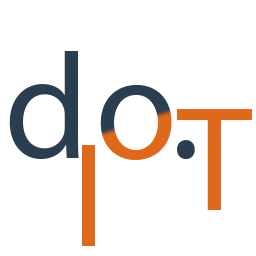
<style>
.page{position:relative;width:256px;height:256px;background:#ffffff}
.page>*{position:absolute;margin:0}
.t1{font:150px "MyriadPro-Regular";color:#2b3e50}
.t2{font:150px "MyriadPro-Regular"}
.t3{font:150px "MyriadPro-Regular";color:#df691a}
</style>
<div class="page">
<p class="t1" style="left:9px;top:51px;width:70px;height:109px">d</p>
<p class="t2" style="left:100px;top:84px;width:72px;height:77px">o</p>
<p class="t3" style="left:177px;top:109px;width:75px;height:101px">T</p>
<p class="t1" style="left:177px;top:140px;width:18px;height:20px">.</p>
</div>
